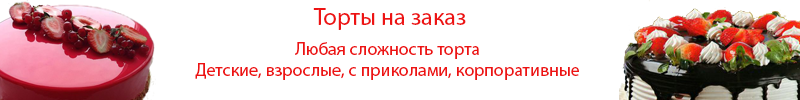
<style>
.page{position:relative;width:800px;height:100px;background:#ffffff}
.page>*{position:absolute;margin:0}
.t1{font:24px "MyriadPro-Regular";color:#ed1313}
.t2{font:18px "MyriadPro-Regular";color:#ed1313}
</style>
<div class="page">
<p class="t1" style="left:313px;top:8px;width:153px;height:22px">Торты на заказ</p>
<p class="t2" style="left:195px;top:42px;width:384px;height:38px;text-align:center">Любая сложность торта<br>Детские, взрослые, с приколами, корпоративные</p>
</div>
